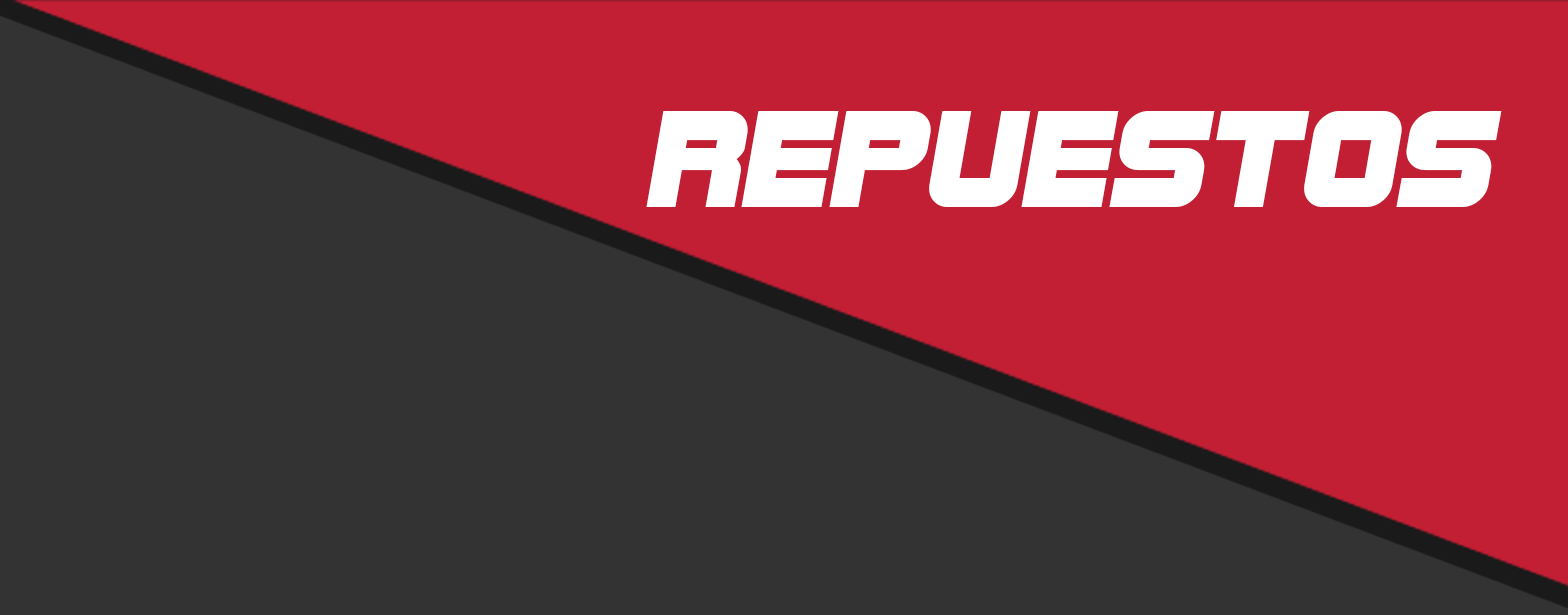
<style>
.page{position:relative;width:1568px;height:615px;background:#333333}
.page>*{position:absolute;margin:0}
.t1{font:143.7px "SFSportsNightNS";color:#ffffff}
</style>
<div class="page">
<p class="t1" style="left:646px;top:111px;width:856px;height:96px">repuestos</p>
</div>
